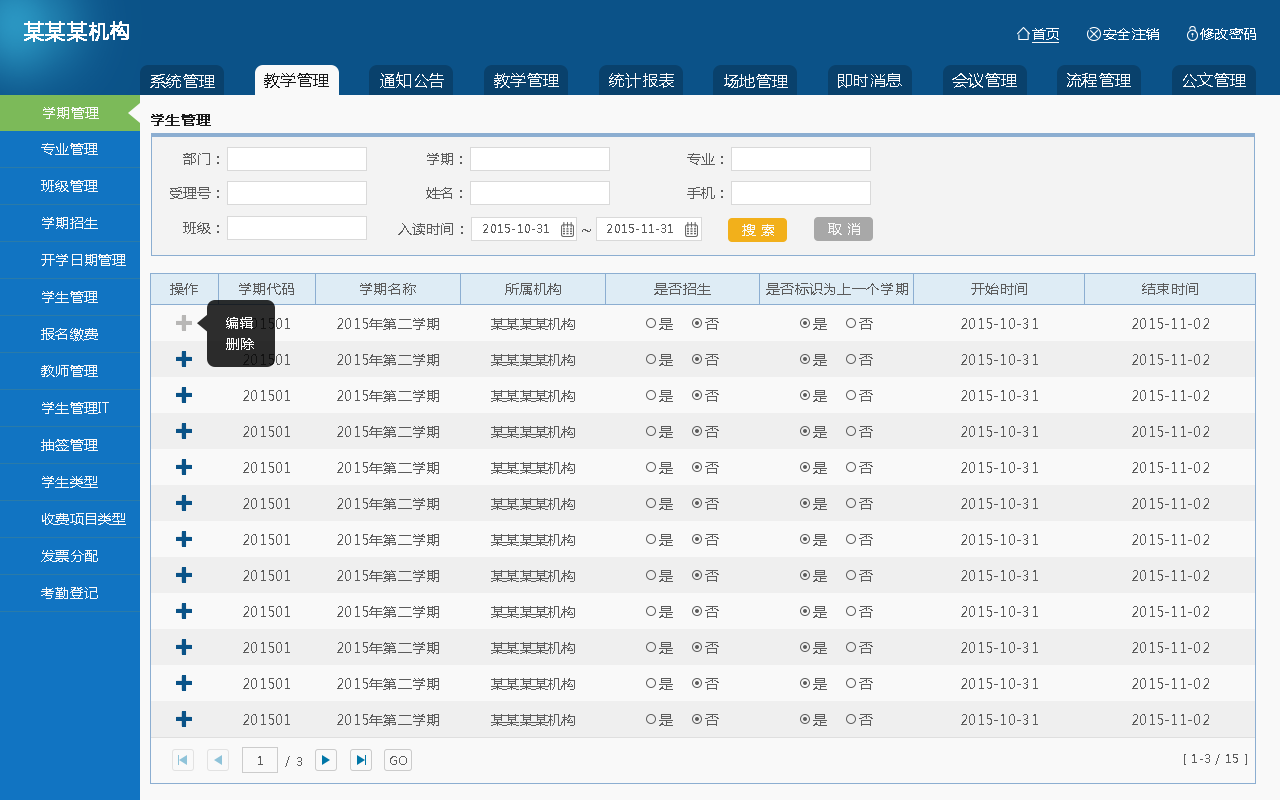
<style>
.page{position:relative;width:1280px;height:800px;background:#f9f9f9}
.page>*{position:absolute;margin:0}
.t1{font:20px "MicrosoftYaHei";letter-spacing:0.02em;color:#ffffff;font-weight:bold}
.t2{font:14px "MicrosoftYaHei";letter-spacing:0.02em;color:#ffffff}
.t3{font:16px "MicrosoftYaHei";letter-spacing:0.02em;color:#f9f9f9}
.t4{font:16px "MicrosoftYaHei";letter-spacing:0.02em;color:#1a1a1a}
.t5{font:14px "MicrosoftYaHei";letter-spacing:0.02em;color:#f9f9f9}
.t6{font:14px "MicrosoftYaHei";letter-spacing:0.02em;color:#1a1a1a;font-weight:bold}
.t7{font:14px "MicrosoftYaHei";letter-spacing:0.02em;color:#5c5c5c}
.t8{font:12px "MicrosoftYaHei";letter-spacing:0.02em;color:#5c5c5c}
.t9{font:18px "MicrosoftYaHei";letter-spacing:0.02em;color:#5c5c5c}
.t10{font:12px "MicrosoftYaHei";color:#5c5c5c}
</style>
<div class="page">
<p class="t1" style="left:24px;top:21px;width:105px;height:21px">某某某机构</p>
<p class="t2" style="left:1032px;top:28px;width:27px;height:12px">首页</p>
<p class="t2" style="left:1103px;top:28px;width:56px;height:12px">安全注销</p>
<p class="t2" style="left:1200px;top:28px;width:56px;height:12px">修改密码</p>
<p class="t3" style="left:150px;top:74px;width:65px;height:14px">系统管理</p>
<p class="t4" style="left:264px;top:73px;width:65px;height:15px">教学管理</p>
<p class="t3" style="left:380px;top:72px;width:64px;height:16px">通知公告</p>
<p class="t3" style="left:494px;top:73px;width:65px;height:15px">教学管理</p>
<p class="t3" style="left:609px;top:73px;width:65px;height:15px">统计报表</p>
<p class="t3" style="left:724px;top:74px;width:64px;height:14px">场地管理</p>
<p class="t3" style="left:838px;top:73px;width:64px;height:15px">即时消息</p>
<p class="t3" style="left:952px;top:73px;width:65px;height:15px">会议管理</p>
<p class="t3" style="left:1067px;top:73px;width:64px;height:15px">流程管理</p>
<p class="t3" style="left:1183px;top:72px;width:63px;height:16px">公文管理</p>
<p class="t5" style="left:43px;top:107px;width:56px;height:12px">学期管理</p>
<p class="t6" style="left:151px;top:114px;width:60px;height:12px">学生管理</p>
<p class="t5" style="left:41px;top:143px;width:57px;height:12px">专业管理</p>
<p class="t7" style="left:183px;top:153px;width:36px;height:12px">部门：</p>
<p class="t7" style="left:427px;top:153px;width:35px;height:12px">学期：</p>
<p class="t7" style="left:687px;top:153px;width:36px;height:12px">专业：</p>
<p class="t5" style="left:41px;top:180px;width:57px;height:12px">班级管理</p>
<p class="t7" style="left:170px;top:187px;width:49px;height:12px">受理号：</p>
<p class="t7" style="left:426px;top:187px;width:36px;height:12px">姓名：</p>
<p class="t7" style="left:687px;top:187px;width:36px;height:12px">手机：</p>
<p class="t5" style="left:42px;top:217px;width:56px;height:12px">学期招生</p>
<p class="t7" style="left:183px;top:222px;width:36px;height:12px">班级：</p>
<p class="t7" style="left:398px;top:223px;width:65px;height:12px">入读时间：</p>
<p class="t8" style="left:483px;top:224px;width:66px;height:9px">2015-10-31</p>
<p class="t9" style="left:582px;top:229px;width:9px;height:3px">~</p>
<p class="t8" style="left:607px;top:224px;width:66px;height:9px">2015-11-31</p>
<p class="t5" style="left:742px;top:224px;width:32px;height:12px">搜 索</p>
<p class="t5" style="left:828px;top:223px;width:32px;height:12px">取 消</p>
<p class="t5" style="left:41px;top:254px;width:85px;height:12px">开学日期管理</p>
<p class="t5" style="left:42px;top:291px;width:56px;height:12px">学生管理</p>
<p class="t7" style="left:170px;top:283px;width:28px;height:12px">操作</p>
<p class="t7" style="left:239px;top:283px;width:55px;height:12px">学期代码</p>
<p class="t7" style="left:360px;top:283px;width:56px;height:12px">学期名称</p>
<p class="t7" style="left:505px;top:283px;width:56px;height:12px">所属机构</p>
<p class="t7" style="left:654px;top:283px;width:57px;height:12px">是否招生</p>
<p class="t7" style="left:766px;top:283px;width:142px;height:12px">是否标识为上一个学期</p>
<p class="t7" style="left:971px;top:283px;width:56px;height:12px">开始时间</p>
<p class="t7" style="left:1142px;top:283px;width:56px;height:12px">结束时间</p>
<p class="t2" style="left:226px;top:317px;width:27px;height:12px">编辑</p>
<p class="t7" style="left:337px;top:318px;width:102px;height:12px">2015年第二学期</p>
<p class="t7" style="left:491px;top:318px;width:84px;height:12px">某某某某机构</p>
<p class="t7" style="left:659px;top:318px;width:14px;height:12px">是</p>
<p class="t7" style="left:705px;top:318px;width:14px;height:12px">否</p>
<p class="t7" style="left:813px;top:318px;width:14px;height:12px">是</p>
<p class="t7" style="left:859px;top:318px;width:14px;height:12px">否</p>
<p class="t7" style="left:961px;top:318px;width:77px;height:11px">2015-10-31</p>
<p class="t7" style="left:1132px;top:318px;width:77px;height:11px">2015-11-02</p>
<p class="t5" style="left:41px;top:328px;width:57px;height:13px">报名缴费</p>
<p class="t2" style="left:226px;top:338px;width:28px;height:12px">删除</p>
<p class="t5" style="left:41px;top:365px;width:57px;height:12px">教师管理</p>
<p class="t7" style="left:337px;top:354px;width:102px;height:12px">2015年第二学期</p>
<p class="t7" style="left:491px;top:354px;width:84px;height:12px">某某某某机构</p>
<p class="t7" style="left:659px;top:354px;width:14px;height:12px">是</p>
<p class="t7" style="left:705px;top:354px;width:14px;height:12px">否</p>
<p class="t7" style="left:813px;top:354px;width:14px;height:12px">是</p>
<p class="t7" style="left:859px;top:354px;width:14px;height:12px">否</p>
<p class="t7" style="left:961px;top:354px;width:77px;height:11px">2015-10-31</p>
<p class="t7" style="left:1132px;top:354px;width:77px;height:11px">2015-11-02</p>
<p class="t7" style="left:243px;top:390px;width:47px;height:11px">201501</p>
<p class="t7" style="left:337px;top:390px;width:102px;height:12px">2015年第二学期</p>
<p class="t7" style="left:491px;top:390px;width:84px;height:12px">某某某某机构</p>
<p class="t7" style="left:659px;top:390px;width:14px;height:12px">是</p>
<p class="t7" style="left:705px;top:390px;width:14px;height:12px">否</p>
<p class="t7" style="left:813px;top:390px;width:14px;height:12px">是</p>
<p class="t7" style="left:859px;top:390px;width:14px;height:12px">否</p>
<p class="t7" style="left:961px;top:390px;width:77px;height:11px">2015-10-31</p>
<p class="t7" style="left:1132px;top:390px;width:77px;height:11px">2015-11-02</p>
<p class="t5" style="left:42px;top:402px;width:67px;height:12px">学生管理IT</p>
<p class="t7" style="left:243px;top:426px;width:47px;height:11px">201501</p>
<p class="t7" style="left:337px;top:426px;width:102px;height:12px">2015年第二学期</p>
<p class="t7" style="left:491px;top:426px;width:84px;height:12px">某某某某机构</p>
<p class="t7" style="left:659px;top:426px;width:14px;height:12px">是</p>
<p class="t7" style="left:705px;top:426px;width:14px;height:12px">否</p>
<p class="t7" style="left:813px;top:426px;width:14px;height:12px">是</p>
<p class="t7" style="left:859px;top:426px;width:14px;height:12px">否</p>
<p class="t7" style="left:961px;top:426px;width:77px;height:11px">2015-10-31</p>
<p class="t7" style="left:1132px;top:426px;width:77px;height:11px">2015-11-02</p>
<p class="t5" style="left:41px;top:439px;width:57px;height:12px">抽签管理</p>
<p class="t7" style="left:243px;top:462px;width:47px;height:11px">201501</p>
<p class="t7" style="left:337px;top:462px;width:102px;height:12px">2015年第二学期</p>
<p class="t7" style="left:491px;top:462px;width:84px;height:12px">某某某某机构</p>
<p class="t7" style="left:659px;top:462px;width:14px;height:12px">是</p>
<p class="t7" style="left:705px;top:462px;width:14px;height:12px">否</p>
<p class="t7" style="left:813px;top:462px;width:14px;height:12px">是</p>
<p class="t7" style="left:859px;top:462px;width:14px;height:12px">否</p>
<p class="t7" style="left:961px;top:462px;width:77px;height:11px">2015-10-31</p>
<p class="t7" style="left:1132px;top:462px;width:77px;height:11px">2015-11-02</p>
<p class="t5" style="left:42px;top:476px;width:56px;height:12px">学生类型</p>
<p class="t7" style="left:243px;top:498px;width:47px;height:11px">201501</p>
<p class="t7" style="left:337px;top:498px;width:102px;height:12px">2015年第二学期</p>
<p class="t7" style="left:491px;top:498px;width:84px;height:12px">某某某某机构</p>
<p class="t7" style="left:659px;top:498px;width:14px;height:12px">是</p>
<p class="t7" style="left:705px;top:498px;width:14px;height:12px">否</p>
<p class="t7" style="left:813px;top:498px;width:14px;height:12px">是</p>
<p class="t7" style="left:859px;top:498px;width:14px;height:12px">否</p>
<p class="t7" style="left:961px;top:498px;width:77px;height:11px">2015-10-31</p>
<p class="t7" style="left:1132px;top:498px;width:77px;height:11px">2015-11-02</p>
<p class="t5" style="left:42px;top:513px;width:84px;height:12px">收费项目类型</p>
<p class="t7" style="left:243px;top:534px;width:47px;height:11px">201501</p>
<p class="t7" style="left:337px;top:534px;width:102px;height:12px">2015年第二学期</p>
<p class="t7" style="left:491px;top:534px;width:84px;height:12px">某某某某机构</p>
<p class="t7" style="left:659px;top:534px;width:14px;height:12px">是</p>
<p class="t7" style="left:705px;top:534px;width:14px;height:12px">否</p>
<p class="t7" style="left:813px;top:534px;width:14px;height:12px">是</p>
<p class="t7" style="left:859px;top:534px;width:14px;height:12px">否</p>
<p class="t7" style="left:961px;top:534px;width:77px;height:11px">2015-10-31</p>
<p class="t7" style="left:1132px;top:534px;width:77px;height:11px">2015-11-02</p>
<p class="t5" style="left:41px;top:550px;width:57px;height:12px">发票分配</p>
<p class="t7" style="left:243px;top:570px;width:47px;height:11px">201501</p>
<p class="t7" style="left:337px;top:570px;width:102px;height:12px">2015年第二学期</p>
<p class="t7" style="left:491px;top:570px;width:84px;height:12px">某某某某机构</p>
<p class="t7" style="left:659px;top:570px;width:14px;height:12px">是</p>
<p class="t7" style="left:705px;top:570px;width:14px;height:12px">否</p>
<p class="t7" style="left:813px;top:570px;width:14px;height:12px">是</p>
<p class="t7" style="left:859px;top:570px;width:14px;height:12px">否</p>
<p class="t7" style="left:961px;top:570px;width:77px;height:11px">2015-10-31</p>
<p class="t7" style="left:1132px;top:570px;width:77px;height:11px">2015-11-02</p>
<p class="t5" style="left:41px;top:587px;width:57px;height:12px">考勤登记</p>
<p class="t7" style="left:243px;top:606px;width:47px;height:11px">201501</p>
<p class="t7" style="left:337px;top:606px;width:102px;height:12px">2015年第二学期</p>
<p class="t7" style="left:491px;top:606px;width:84px;height:12px">某某某某机构</p>
<p class="t7" style="left:659px;top:606px;width:14px;height:12px">是</p>
<p class="t7" style="left:705px;top:606px;width:14px;height:12px">否</p>
<p class="t7" style="left:813px;top:606px;width:14px;height:12px">是</p>
<p class="t7" style="left:859px;top:606px;width:14px;height:12px">否</p>
<p class="t7" style="left:961px;top:606px;width:77px;height:11px">2015-10-31</p>
<p class="t7" style="left:1132px;top:606px;width:77px;height:11px">2015-11-02</p>
<p class="t7" style="left:243px;top:642px;width:47px;height:11px">201501</p>
<p class="t7" style="left:337px;top:642px;width:102px;height:12px">2015年第二学期</p>
<p class="t7" style="left:491px;top:642px;width:84px;height:12px">某某某某机构</p>
<p class="t7" style="left:659px;top:642px;width:14px;height:12px">是</p>
<p class="t7" style="left:705px;top:642px;width:14px;height:12px">否</p>
<p class="t7" style="left:813px;top:642px;width:14px;height:12px">是</p>
<p class="t7" style="left:859px;top:642px;width:14px;height:12px">否</p>
<p class="t7" style="left:961px;top:642px;width:77px;height:11px">2015-10-31</p>
<p class="t7" style="left:1132px;top:642px;width:77px;height:11px">2015-11-02</p>
<p class="t7" style="left:243px;top:678px;width:47px;height:11px">201501</p>
<p class="t7" style="left:337px;top:678px;width:102px;height:12px">2015年第二学期</p>
<p class="t7" style="left:491px;top:678px;width:84px;height:12px">某某某某机构</p>
<p class="t7" style="left:659px;top:678px;width:14px;height:12px">是</p>
<p class="t7" style="left:705px;top:678px;width:14px;height:12px">否</p>
<p class="t7" style="left:813px;top:678px;width:14px;height:12px">是</p>
<p class="t7" style="left:859px;top:678px;width:14px;height:12px">否</p>
<p class="t7" style="left:961px;top:678px;width:77px;height:11px">2015-10-31</p>
<p class="t7" style="left:1132px;top:678px;width:77px;height:11px">2015-11-02</p>
<p class="t7" style="left:243px;top:714px;width:47px;height:11px">201501</p>
<p class="t7" style="left:337px;top:714px;width:102px;height:12px">2015年第二学期</p>
<p class="t7" style="left:491px;top:714px;width:84px;height:12px">某某某某机构</p>
<p class="t7" style="left:659px;top:714px;width:14px;height:12px">是</p>
<p class="t7" style="left:705px;top:714px;width:14px;height:12px">否</p>
<p class="t7" style="left:813px;top:714px;width:14px;height:12px">是</p>
<p class="t7" style="left:859px;top:714px;width:14px;height:12px">否</p>
<p class="t7" style="left:961px;top:714px;width:77px;height:11px">2015-10-31</p>
<p class="t7" style="left:1132px;top:714px;width:77px;height:11px">2015-11-02</p>
<p class="t8" style="left:258px;top:756px;width:5px;height:9px">1</p>
<p class="t8" style="left:285px;top:756px;width:5px;height:11px">/</p>
<p class="t8" style="left:297px;top:757px;width:5px;height:9px">3</p>
<p class="t10" style="left:390px;top:756px;width:17px;height:9px">GO</p>
<p class="t8" style="left:1184px;top:754px;width:63px;height:11px">[ 1-3 / 15 ]</p>
</div>
